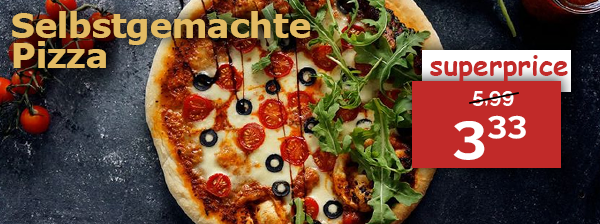
<style>
.page{position:relative;width:600px;height:224px}
.page>*{position:absolute;margin:0}
.t1{font:35px/30px "Tahoma-Bold";color:#e3bb63;scale:1.06 1}
.t2{font:27.9px "ComicSansMS-Bold";color:#c12a29}
.t3{font:21.4px "Raleway-Bold";color:#ffffff}
.t4{font:54.1px "Raleway-Bold";color:#ffffff;scale:1.14 1}
</style>
<div class="page">
<p class="t1" style="left:12px;top:11px;width:299px;height:57px">Selbstgemachte <br>Pizza</p>
<p class="t2" style="left:430px;top:55px;width:138px;height:28px">superprice</p>
<p class="t3" style="left:472px;top:91px;width:42px;height:15px">5,99</p>
<p class="t4" style="left:453px;top:115px;width:73px;height:45px">333</p>
</div>
